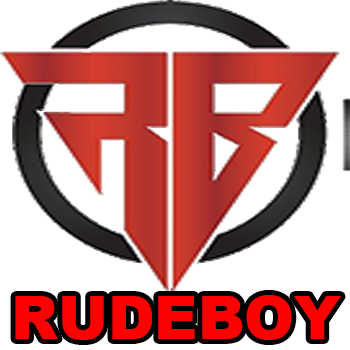
<style>
.page{position:relative;width:350px;height:350px;background:#ffffff}
.page>*{position:absolute;margin:0}
.t1{font:60px "Arial-Black";color:#ff0000}
</style>
<div class="page">
<p class="t1" style="left:15px;top:295px;width:326px;height:45px">RUDEBOY</p>
</div>
